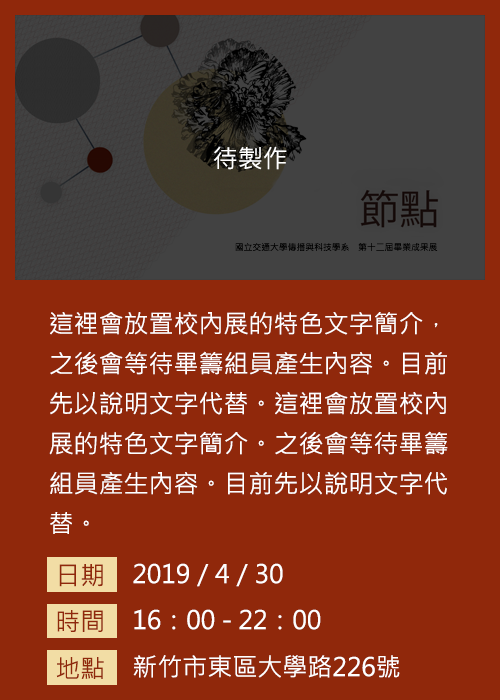
<style>
.page{position:relative;width:500px;height:700px;background:#90280b}
.page>*{position:absolute;margin:0}
.t1{font:25px "MicrosoftJhengHeiRegular";color:#ffffff}
.t2{font:8.8px "MicrosoftJhengHeiRegular";color:#000000}
.t3{font:25px/40px "MicrosoftJhengHeiRegular";color:#ffffff}
.t4{font:25px "MicrosoftJhengHeiRegular";color:#90280b}
</style>
<div class="page">
<p class="t1" style="left:214px;top:146px;width:73px;height:24px">待製作</p>
<p class="t2" style="left:235px;top:243px;width:203px;height:8px">國立交通大學傳播與科技學系　第十二屆畢業成果展</p>
<p class="t3" style="left:49px;top:312px;width:399px;height:222px">這裡會放置校內展的特色文字簡介，<br>之後會等待畢籌組員產生內容。目前<br>先以說明文字代替。這裡會放置校內<br>展的特色文字簡介。之後會等待畢籌<br>組員產生內容。目前先以說明文字代<br>替。</p>
<p class="t4" style="left:59px;top:564px;width:44px;height:23px">日期</p>
<p class="t1" style="left:133px;top:563px;width:150px;height:24px">2019／4／30</p>
<p class="t4" style="left:57px;top:610px;width:46px;height:22px">時間</p>
<p class="t1" style="left:134px;top:609px;width:187px;height:21px">16：00 - 22：00</p>
<p class="t4" style="left:56px;top:657px;width:48px;height:22px">地點</p>
<p class="t1" style="left:133px;top:655px;width:267px;height:23px">新竹市東區大學路226號</p>
</div>
